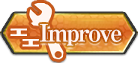
<style>
.page{position:relative;width:138px;height:63px;background:#ffffff}
.page>*{position:absolute;margin:0}
.t1{font:24px "RyuminPro-ExBold";letter-spacing:-0.08em;color:#fff6f2}
</style>
<div class="page">
<p class="t1" style="left:40px;top:24px;width:82px;height:22px">Improve</p>
</div>
